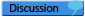
<style>
.page{position:relative;width:85px;height:17px;background:#3c8ddf}
.page>*{position:absolute;margin:0}
.t1{font:10.8px "MyriadWebPro";color:#000000}
</style>
<div class="page">
<p class="t1" style="left:10px;top:4px;width:49px;height:8px">Discussion</p>
</div>
